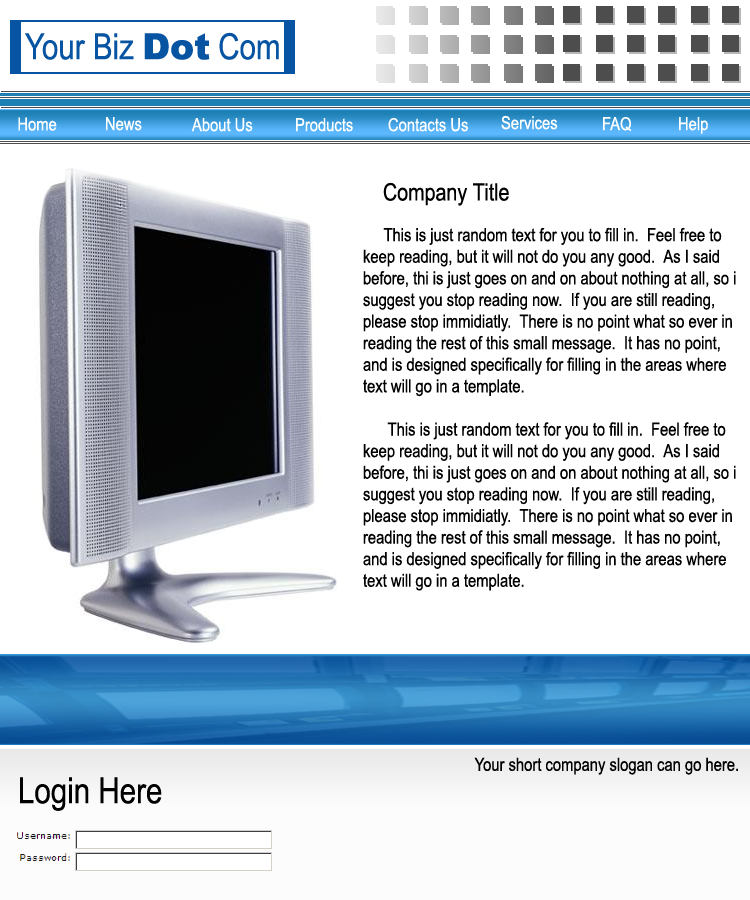
<style>
.page{position:relative;width:750px;height:900px;background:#ffffff}
.page>*{position:absolute;margin:0}
.t1{font:36px "ArialNarrow";color:#0754a2}
.t2{font:36px "Arial-Black";color:#0754a2}
.t3{font:18px "ArialNarrow";color:#ffffff}
.t4{font:24px "ArialNarrow";color:#000000}
.t5{font:18px "ArialNarrow";color:#000000}
.t6{font:36px "ArialNarrow";color:#000000}
</style>
<div class="page">
<p class="t1" style="left:25px;top:32px;width:254px;height:28px">Your Biz <span class="t2">Dot</span> Com</p>
<p class="t3" style="left:18px;top:117px;width:39px;height:14px">Home</p>
<p class="t3" style="left:106px;top:117px;width:36px;height:14px">News</p>
<p class="t3" style="left:191px;top:118px;width:62px;height:14px">About Us</p>
<p class="t3" style="left:296px;top:118px;width:57px;height:14px">Products</p>
<p class="t3" style="left:388px;top:117px;width:80px;height:15px">Contacts Us</p>
<p class="t3" style="left:501px;top:115px;width:57px;height:15px">Services</p>
<p class="t3" style="left:603px;top:116px;width:29px;height:16px">FAQ</p>
<p class="t3" style="left:679px;top:117px;width:29px;height:17px">Help</p>
<p class="t4" style="left:383px;top:182px;width:126px;height:24px">Company Title</p>
<p class="t5" style="left:363px;top:227px;width:373px;height:364px">This is just random text for you to fill in.  Feel free to keep reading, but it will not do you any good.  As I said before, thi is just goes on and on about nothing at all, so i suggest you stop reading now.  If you are still reading, please stop immidiatly.  There is no point what so ever in reading the rest of this small message.  It has no point, and is designed specifically for filling in the areas where text will go in a template.    <br><br>      This is just random text for you to fill in.  Feel free to keep reading, but it will not do you any good.  As I said before, thi is just goes on and on about nothing at all, so i suggest you stop reading now.  If you are still reading, please stop immidiatly.  There is no point what so ever in reading the rest of this small message.  It has no point, and is designed specifically for filling in the areas where text will go in a template.</p>
<p class="t5" style="left:474px;top:757px;width:264px;height:18px">Your short company slogan can go here.</p>
<p class="t6" style="left:20px;top:777px;width:142px;height:34px">Login Here</p>
</div>
